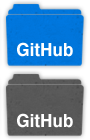
<style>
.page{position:relative;width:90px;height:140px}
.page>*{position:absolute;margin:0}
.t1{font:18px "Helvetica-Bold";color:#ffffff;scale:0.95 1}
</style>
<div class="page">
<p class="t1" style="left:17px;top:42px;width:56px;height:15px">GitHub</p>
<p class="t1" style="left:17px;top:113px;width:56px;height:15px">GitHub</p>
</div>
